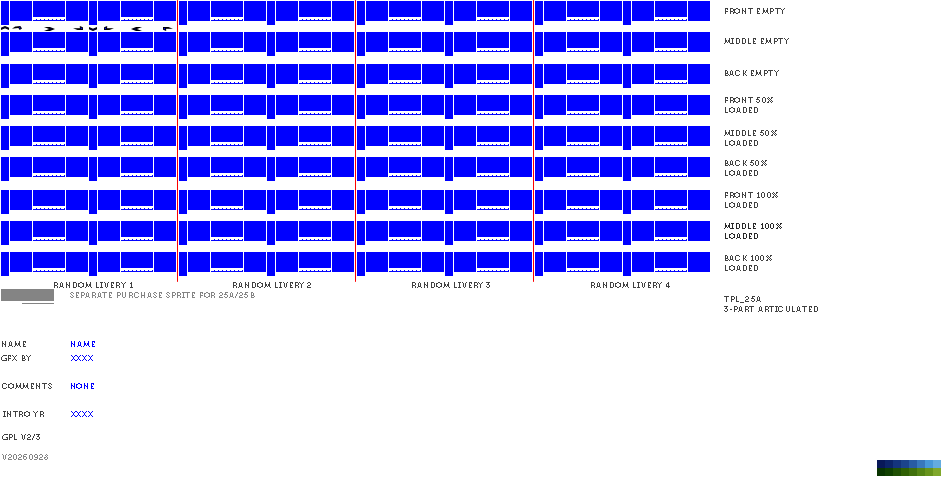
<style>
.page{position:relative;width:950px;height:480px;background:#ffffff}
.page>*{position:absolute;margin:0}
.t1{font:8px "Museo700-Regular";letter-spacing:0.075em;color:#404040;text-transform:uppercase}
.t2{font:8px "Museo700-Regular";letter-spacing:0.075em;color:#282828;text-transform:uppercase}
.t3{font:8px "Museo700-Regular";letter-spacing:0.075em;color:#848484;text-transform:uppercase}
.t4{font:8px "Museo700-Regular";letter-spacing:0.075em;color:#0000ff;text-transform:uppercase}
</style>
<div class="page">
<p class="t1" style="left:725px;top:8px;width:60px;height:6px">front EMPTY</p>
<p class="t1" style="left:724px;top:38px;width:65px;height:6px">middle empty</p>
<p class="t1" style="left:725px;top:70px;width:54px;height:6px">back EMPTY</p>
<p class="t1" style="left:725px;top:97px;width:48px;height:16px">FRONT 50%<br>LOADED</p>
<p class="t1" style="left:724px;top:130px;width:53px;height:16px">middle 50%<br>LOADED</p>
<p class="t1" style="left:725px;top:160px;width:42px;height:16px">BACK 50%<br>LOADED</p>
<p class="t1" style="left:725px;top:192px;width:53px;height:16px">FRONT 100%<br>LOADED</p>
<p class="t2" style="left:724px;top:223px;width:58px;height:16px">middle 100%<br>LOADED</p>
<p class="t1" style="left:725px;top:255px;width:47px;height:16px">BACK 100%<br>LOADED</p>
<p class="t1" style="left:54px;top:282px;width:79px;height:6px">random livery 1</p>
<p class="t3" style="left:70px;top:292px;width:185px;height:6px">separate purchase sprite for 25A/25B</p>
<p class="t1" style="left:233px;top:282px;width:78px;height:6px">random livery 2</p>
<p class="t1" style="left:412px;top:282px;width:78px;height:6px">random livery 3</p>
<p class="t1" style="left:591px;top:282px;width:79px;height:6px">random livery 4</p>
<p class="t1" style="left:724px;top:296px;width:94px;height:16px">tpl_25a<br>3-PART ARTICULATED</p>
<p class="t1" style="left:2px;top:341px;width:24px;height:6px">name</p>
<p class="t4" style="left:71px;top:341px;width:24px;height:6px">name</p>
<p class="t1" style="left:1px;top:355px;width:30px;height:6px">gfx by</p>
<p class="t4" style="left:71px;top:355px;width:22px;height:6px">xxxx</p>
<p class="t1" style="left:2px;top:383px;width:50px;height:6px">comments</p>
<p class="t4" style="left:71px;top:383px;width:23px;height:6px">none</p>
<p class="t1" style="left:3px;top:411px;width:41px;height:6px">intro yr</p>
<p class="t4" style="left:71px;top:411px;width:22px;height:6px">xxxx</p>
<p class="t1" style="left:2px;top:434px;width:38px;height:6px">gpl v2/3</p>
<p class="t3" style="left:2px;top:454px;width:46px;height:6px">v20260928</p>
</div>
